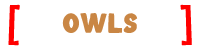
<style>
.page{position:relative;width:200px;height:50px;background:#ffffff}
.page>*{position:absolute;margin:0}
.t1{font:45.8px "MoroBaby-Bold";color:#ff0000;text-transform:uppercase}
.t2{font:26.6px "MoroBaby-Bold";color:#c98644}
</style>
<div class="page">
<p class="t1" style="left:8px;top:4px;width:12px;height:42px">[</p>
<p class="t1" style="left:180px;top:4px;width:12px;height:42px">]</p>
<p class="t2" style="left:62px;top:13px;width:76px;height:20px">OWLS</p>
</div>
